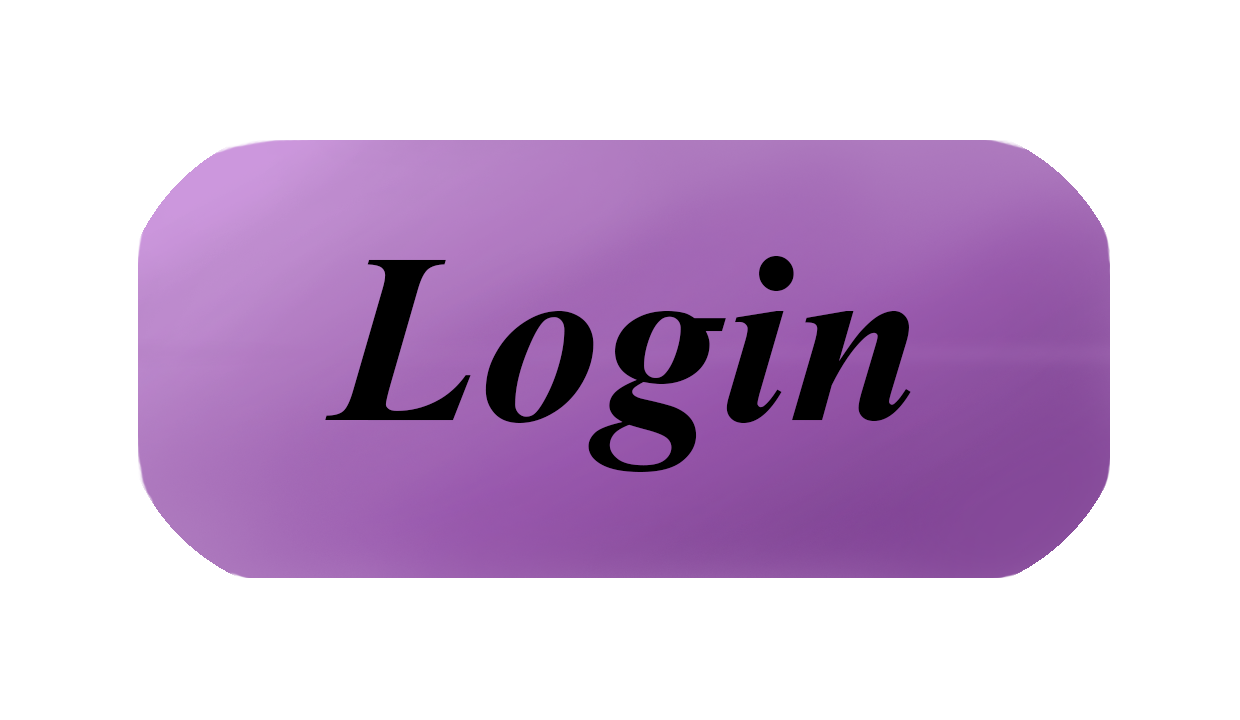
<style>
.page{position:relative;width:1240px;height:720px;background:#ffffff}
.page>*{position:absolute;margin:0}
.t1{font:300px "Vijaya-Bold";color:#000000}
</style>
<div class="page">
<p class="t1" style="left:325px;top:255px;width:586px;height:217px">Login</p>
</div>
